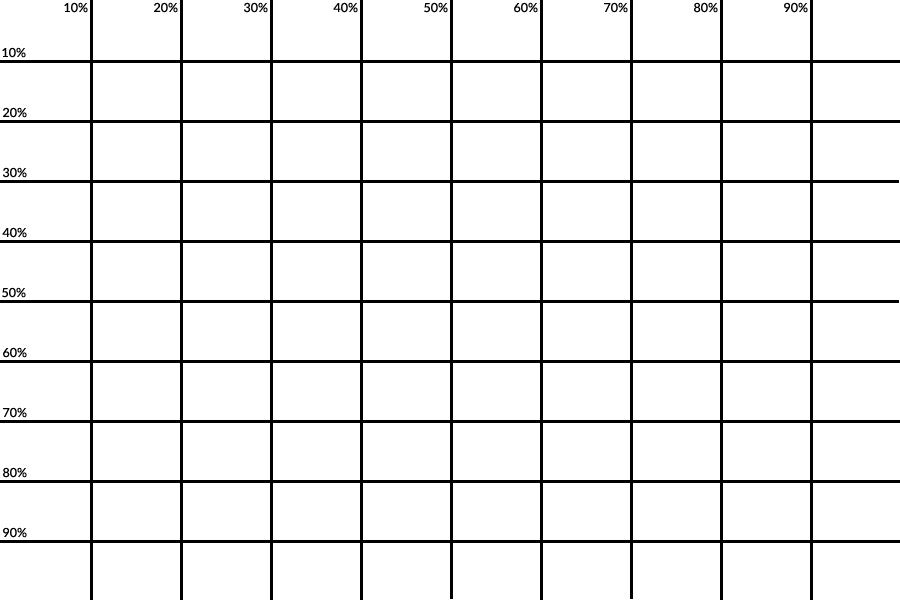
<style>
.page{position:relative;width:900px;height:600px;background:#ffffff}
.page>*{position:absolute;margin:0}
.t1{font:12.5px "Lato-Regular";color:#000000}
</style>
<div class="page">
<p class="t1" style="left:64px;top:2px;width:24px;height:11px">10%</p>
<p class="t1" style="left:154px;top:2px;width:24px;height:11px">20%</p>
<p class="t1" style="left:244px;top:2px;width:24px;height:11px">30%</p>
<p class="t1" style="left:333px;top:2px;width:25px;height:11px">40%</p>
<p class="t1" style="left:424px;top:2px;width:24px;height:11px">50%</p>
<p class="t1" style="left:514px;top:2px;width:24px;height:11px">60%</p>
<p class="t1" style="left:604px;top:2px;width:24px;height:11px">70%</p>
<p class="t1" style="left:694px;top:2px;width:24px;height:11px">80%</p>
<p class="t1" style="left:784px;top:2px;width:24px;height:11px">90%</p>
<p class="t1" style="left:2px;top:47px;width:24px;height:11px">10%</p>
<p class="t1" style="left:3px;top:107px;width:24px;height:11px">20%</p>
<p class="t1" style="left:3px;top:167px;width:24px;height:11px">30%</p>
<p class="t1" style="left:2px;top:227px;width:25px;height:11px">40%</p>
<p class="t1" style="left:2px;top:287px;width:24px;height:11px">50%</p>
<p class="t1" style="left:3px;top:347px;width:24px;height:11px">60%</p>
<p class="t1" style="left:3px;top:407px;width:24px;height:11px">70%</p>
<p class="t1" style="left:3px;top:467px;width:24px;height:11px">80%</p>
<p class="t1" style="left:3px;top:527px;width:24px;height:11px">90%</p>
</div>
